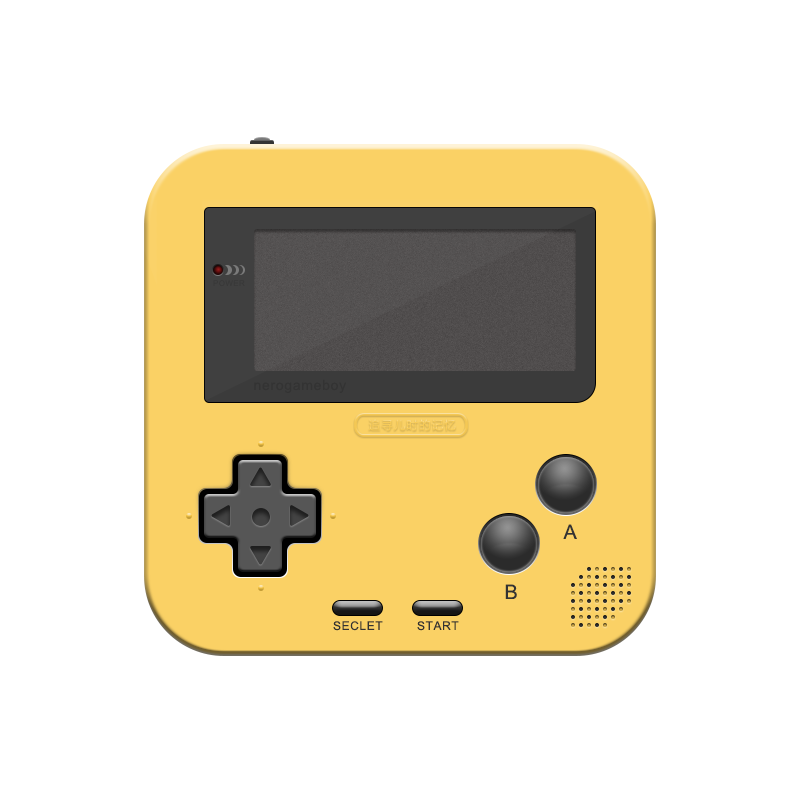
<style>
.page{position:relative;width:800px;height:800px;background:#ffffff}
.page>*{position:absolute;margin:0}
.t1{font:8px "ArialMT";letter-spacing:0.05em;color:#333333}
.t2{font:14px "ArialMT";letter-spacing:0.05em;color:#333333}
.t3{font:20px "ArialMT";letter-spacing:0.05em;color:#333333}
.t4{font:12px "ArialMT";letter-spacing:0.05em;color:#333333}
</style>
<div class="page">
<p class="t1" style="left:213px;top:280px;width:32px;height:7px">POWER</p>
<p class="t2" style="left:254px;top:379px;width:92px;height:14px">nerogameboy</p>
<p class="t3" style="left:563px;top:524px;width:14px;height:15px">A</p>
<p class="t3" style="left:505px;top:584px;width:12px;height:15px">B</p>
<p class="t4" style="left:333px;top:621px;width:50px;height:10px">SECLET</p>
<p class="t4" style="left:417px;top:621px;width:42px;height:10px">START</p>
</div>
